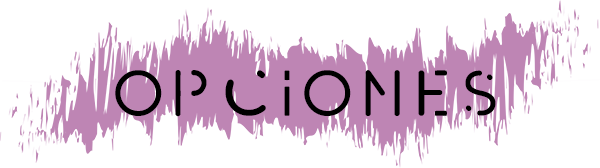
<style>
.page{position:relative;width:600px;height:168px;background:#ffffff}
.page>*{position:absolute;margin:0}
.t1{font:63.1px "Avayx";color:#000000}
</style>
<div class="page">
<p class="t1" style="left:115px;top:70px;width:381px;height:47px">opciones</p>
</div>
